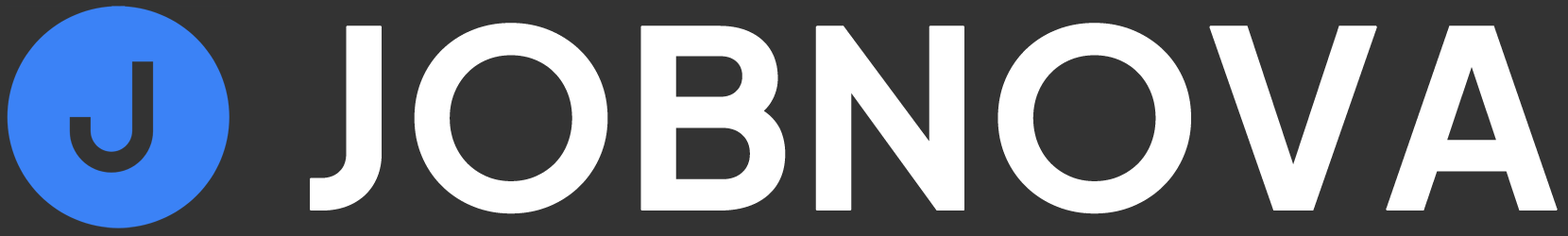
<style>
.page{position:relative;width:1568px;height:236px;background:#333333}
.page>*{position:absolute;margin:0}
.t1{font:245.6px "PlusJakartaSans-Bold";letter-spacing:-0.005em;color:#ffffff;text-transform:uppercase;font-weight:bold}
</style>
<div class="page">
<p class="t1" style="left:310px;top:23px;width:1248px;height:191px">Jobnova</p>
</div>
